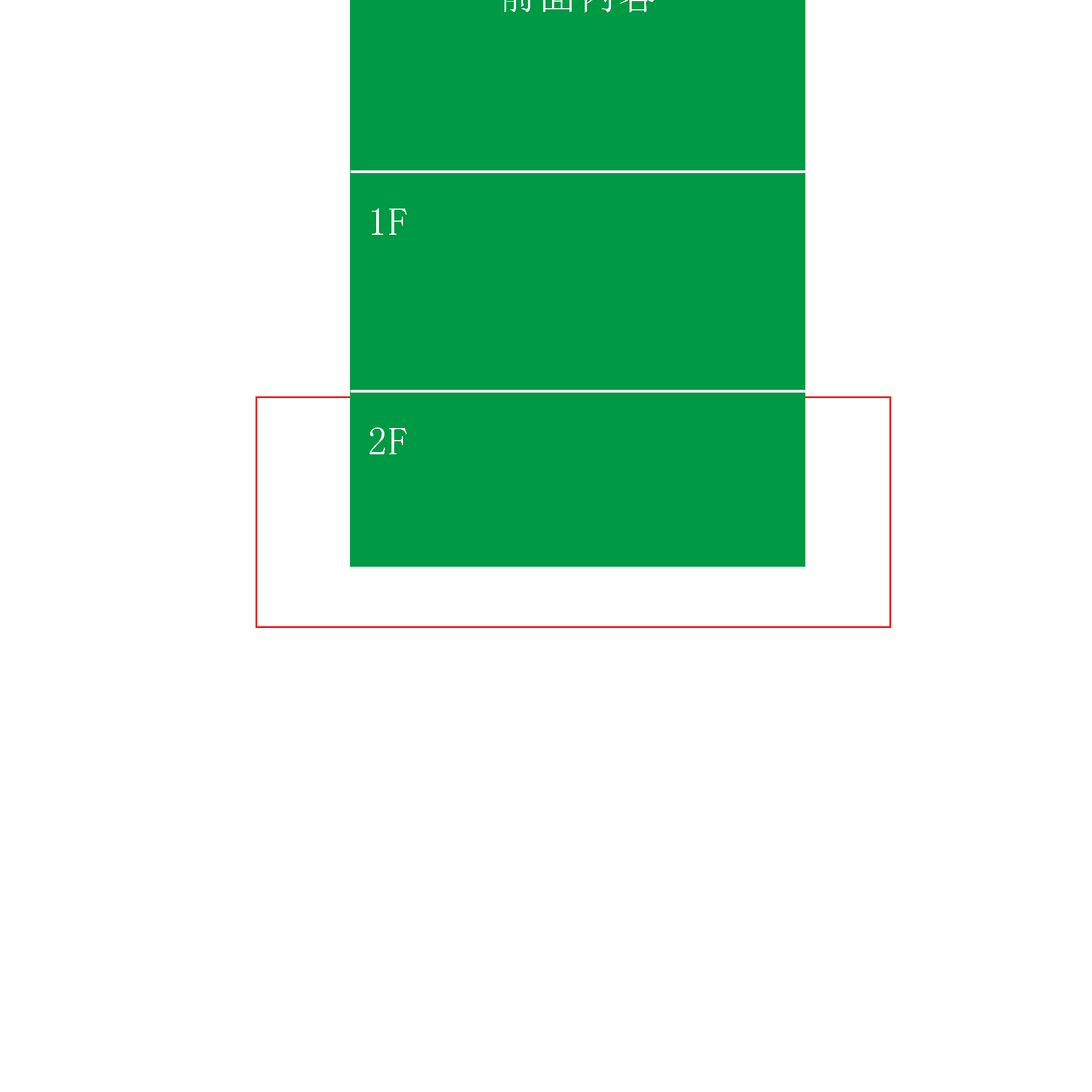
<style>
.page{position:relative;width:1092px;height:1092px;background:#ffffff}
.page>*{position:absolute;margin:0}
.t1{font:39.3px "SimSun";letter-spacing:0.02em;color:#ffffff}
</style>
<div class="page">
<p class="t1" style="left:372px;top:208px;width:35px;height:27px">1F</p>
<p class="t1" style="left:370px;top:428px;width:37px;height:26px">2F</p>
</div>
